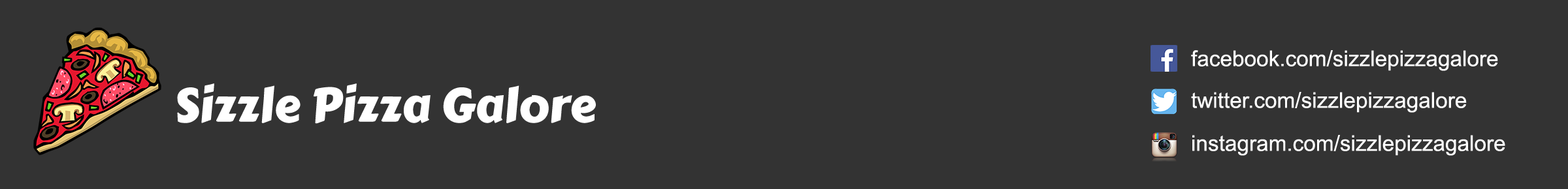
<style>
.page{position:relative;width:1568px;height:189px;background:#333333}
.page>*{position:absolute;margin:0}
.t1{font:21.8px "ArialMT";color:#ffffff}
.t2{font:47.9px "CarterOne";color:#ffffff}
</style>
<div class="page">
<p class="t1" style="left:1191px;top:50px;width:307px;height:21px">facebook.com/sizzlepizzagalore</p>
<p class="t2" style="left:177px;top:84px;width:419px;height:40px">Sizzle Pizza Galore</p>
<p class="t1" style="left:1191px;top:92px;width:276px;height:21px">twitter.com/sizzlepizzagalore</p>
<p class="t1" style="left:1192px;top:135px;width:313px;height:21px">instagram.com/sizzlepizzagalore</p>
</div>
